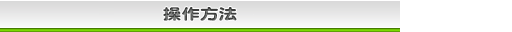
<style>
.page{position:relative;width:512px;height:32px;background:#ffffff}
.page>*{position:absolute;margin:0}
.t1{font:14.9px "DFPYuanW9";scale:1.25 1}
</style>
<div class="page">
<p class="t1" style="left:163px;top:6px;width:74px;height:15px">操作方法</p>
</div>
